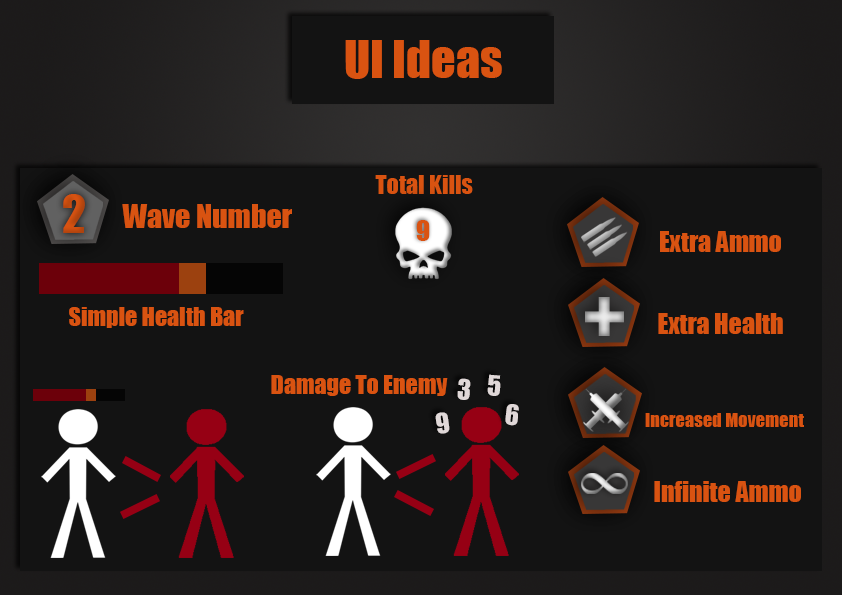
<style>
.page{position:relative;width:842px;height:595px;background:#131313}
.page>*{position:absolute;margin:0}
.t1{font:48px "Impact";color:#d95311}
.t2{font:48px "Impact";color:#c54b0f}
.t3{font:30px "Impact";color:#d95311}
.t4{font:25.9px "Impact";color:#d95311}
.t5{font:24px "Impact";color:#d95311}
.t6{font:25.9px "Impact";color:#e0d8d8}
.t7{font:17.9px "Impact";color:#d95311}
</style>
<div class="page">
<p class="t1" style="left:345px;top:40px;width:157px;height:39px">UI Ideas</p>
<p class="t2" style="left:63px;top:194px;width:22px;height:39px">2</p>
<p class="t3" style="left:122px;top:204px;width:170px;height:24px">Wave Number</p>
<p class="t4" style="left:416px;top:220px;width:14px;height:21px">9</p>
<p class="t4" style="left:660px;top:231px;width:121px;height:21px">Extra Ammo</p>
<p class="t5" style="left:69px;top:307px;width:175px;height:21px">Simple Health Bar</p>
<p class="t4" style="left:658px;top:313px;width:125px;height:21px">Extra Health</p>
<p class="t5" style="left:271px;top:375px;width:177px;height:21px">Damage To Enemy</p>
<p class="t6" style="left:487px;top:374px;width:14px;height:22px;rotate:5deg">5</p>
<p class="t6" style="left:457px;top:378px;width:14px;height:22px;rotate:5deg">3</p>
<p class="t6" style="left:435px;top:412px;width:15px;height:22px;rotate:-8deg">9</p>
<p class="t6" style="left:505px;top:404px;width:14px;height:22px;rotate:6deg">6</p>
<p class="t7" style="left:645px;top:413px;width:159px;height:14px">Increased Movement</p>
<p class="t4" style="left:654px;top:481px;width:147px;height:21px">Infinite Ammo</p>
</div>
